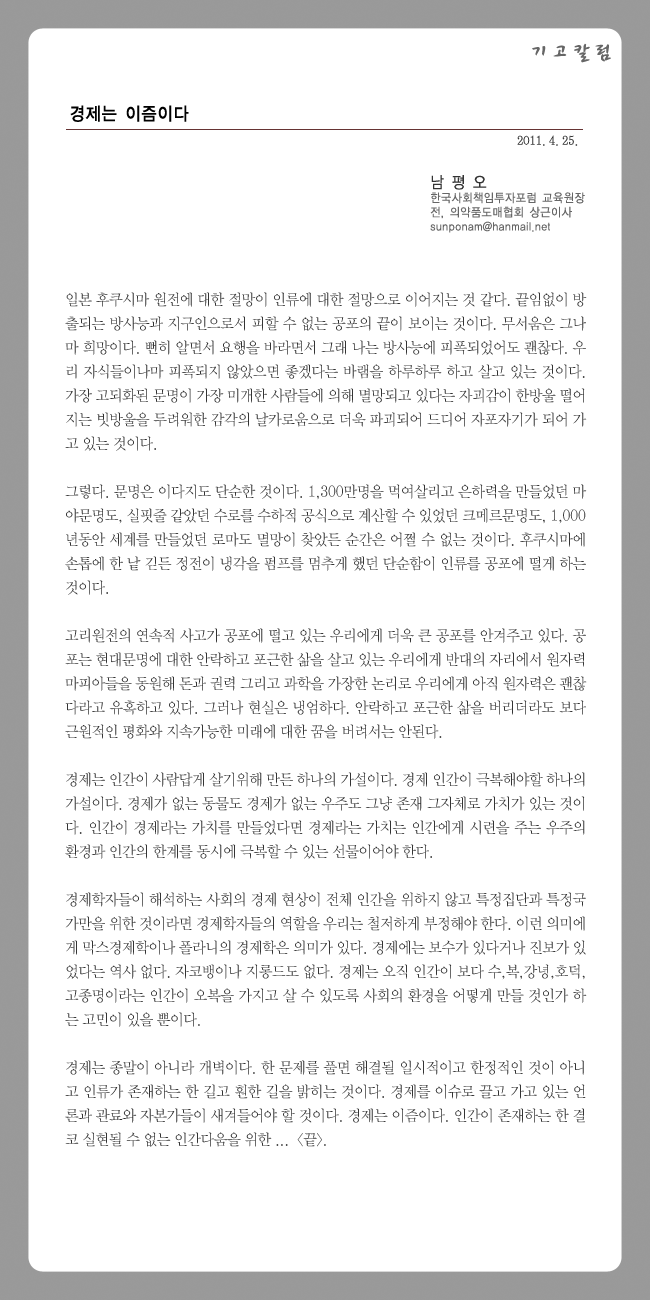
<style>
.page{position:relative;width:650px;height:1300px;background:#ffffff}
.page>*{position:absolute;margin:0}
.t1{font:24px "CwritB";letter-spacing:-0.01em;color:#666666;scale:0.9 1}
.t2{font:18px "YDIYGO130-KSCpc-EUC-H";letter-spacing:-0.01em;color:#000000;scale:0.9 1}
.t3{font:12px "YDIWebBatan";letter-spacing:-0.01em;color:#333333;scale:0.95 1}
.t4{font:12px "YDIYGO120-KSCpc-EUC-H";letter-spacing:-0.01em;color:#666666;scale:0.9 1}
.t5{font:16px "YDIYGO120-KSCpc-EUC-H";letter-spacing:-0.01em;color:#333333;scale:0.9 1}
.t6{font:15px/24px "YDIWebBatan";letter-spacing:-0.01em;color:#333333;scale:0.95 1}
</style>
<div class="page">
<p class="t1" style="left:532px;top:43px;width:79px;height:20px">기고칼럼</p>
<p class="t2" style="left:70px;top:105px;width:119px;height:17px">경제는 이즘이다</p>
<p class="t3" style="left:517px;top:135px;width:61px;height:11px">2011. 4. 25.</p>
<p class="t4" style="left:430px;top:175px;width:155px;height:58px"><span class="t5">남 평 오<br></span>한국사회책임투자포럼 교육원장<br>전, 의약품도매협회 상근이사<br>sunponam@hanmail.net</p>
<p class="t6" style="left:65px;top:292px;width:522px;height:855px;text-align:justify">일본 후쿠시마 원전에 대한 절망이 인류에 대한 절망으로 이어지는 것 같다. 끝임없이 방출되는 방사능과 지구인으로서 피할 수 없는 공포의 끝이 보이는 것이다. 무서움은 그나마 희망이다. 뻔히 알면서 요행을 바라면서 그래 나는 방사능에 피폭되었어도 괜찮다. 우리 자식들이나마 피폭되지 않았으면 좋겠다는 바램을 하루하루 하고 살고 있는 것이다. 가장 고되화된 문명이 가장 미개한 사람들에 의해 멸망되고 있다는 자괴감이 한방울 떨어지는 빗방울을 두려워한 감각의 날카로움으로 더욱 파괴되어 드디어 자포자기가 되어 가고 있는 것이다.<br><br>그렇다. 문명은 이다지도 단순한 것이다. 1,300만명을 먹여살리고 은하력을 만들었던 마야문명도, 실핏줄 같았던 수로를 수하적 공식으로 계산할 수 있었던 크메르문명도, 1,000년동안 세계를 만들었던 로마도 멸망이 찾았든 순간은 어쩔 수 없는 것이다. 후쿠시마에 손톱에 한 낱 긷든 정전이 냉각을 펌프를 멈추게 했던 단순함이 인류를 공포에 떨게 하는 것이다.<br><br>고리원전의 연속적 사고가 공포에 떨고 있는 우리에게 더욱 큰 공포를 안겨주고 있다. 공포는 현대문명에 대한 안락하고 포근한 삶을 살고 있는 우리에게 반대의 자리에서 원자력 마피아들을 동원해 돈과 권력 그리고 과학을 가장한 논리로 우리에게 아직 원자력은 괜찮다라고 유혹하고 있다. 그러나 현실은 냉엄하다. 안락하고 포근한 삶을 버리더라도 보다 근원적인 평화와 지속가능한 미래에 대한 꿈을 버려서는 안된다. <br><br>경제는 인간이 사람답게 살기위해 만든 하나의 가설이다. 경제 인간이 극복해야할 하나의 가설이다. 경제가 없는 동물도 경제가 없는 우주도 그냥 존재 그자체로 가치가 있는 것이다. 인간이 경제라는 가치를 만들었다면 경제라는 가치는 인간에게 시련을 주는 우주의 환경과 인간의 한계를 동시에 극복할 수 있는 선물이어야 한다.<br><br>경제학자들이 해석하는 사회의 경제 현상이 전체 인간을 위하지 않고 특정집단과 특정국가만을 위한 것이라면 경제학자들의 역할을 우리는 철저하게 부정해야 한다. 이런 의미에게 막스경제학이나 폴라니의 경제학은 의미가 있다. 경제에는 보수가 있다거나 진보가 있었다는 역사 없다. 자코뱅이나 지롱드도 없다. 경제는 오직 인간이 보다 수,복,강녕,호덕,고종명이라는 인간이 오복을 가지고 살 수 있도록 사회의 환경을 어떻게 만들 것인가 하는 고민이 있을 뿐이다. <br><br>경제는 종말이 아니라 개벽이다. 한 문제를 풀면 해결될 일시적이고 한정적인 것이 아니고 인류가 존재하는 한 길고 훤한 길을 밝히는 것이다. 경제를 이슈로 끌고 가고 있는 언론과 관료와 자본가들이 새겨들어야 할 것이다. 경제는 이즘이다. 인간이 존재하는 한 결코 실현될 수 없는 인간다움을 위한 ...  &lt;끝&gt;.</p>
</div>
